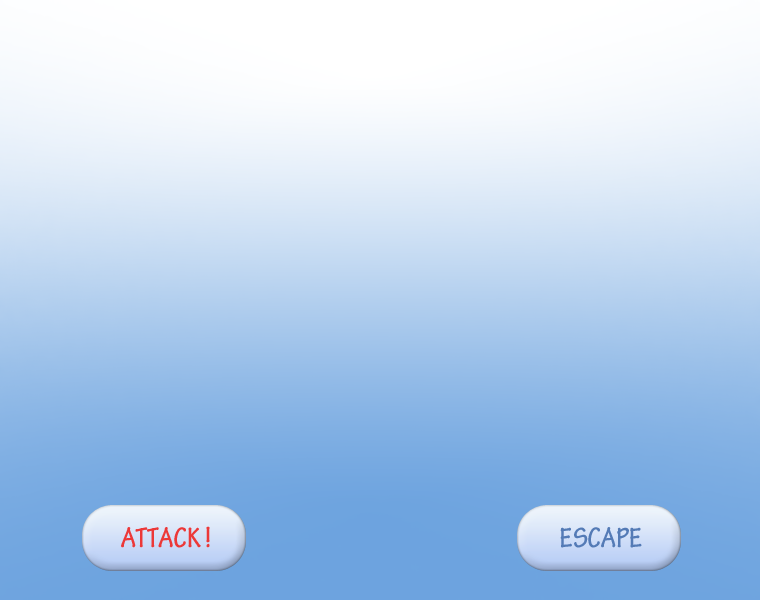
<style>
.page{position:relative;width:760px;height:600px}
.page>*{position:absolute;margin:0}
.t1{font:30px "TektonPro-BoldCond";color:#eb3838}
.t2{font:30px "TektonPro-BoldCond";color:#547bb6}
</style>
<div class="page">
<p class="t1" style="left:121px;top:526px;width:89px;height:22px">ATTACK !</p>
<p class="t2" style="left:560px;top:527px;width:82px;height:21px">ESCAPE</p>
</div>
